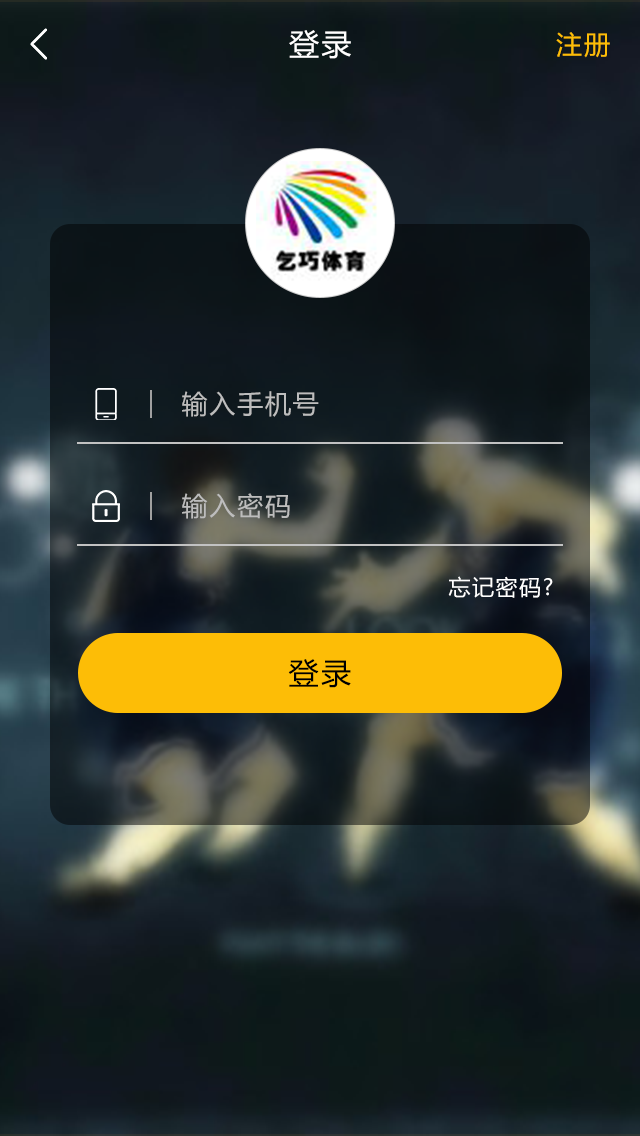
<style>
.page{position:relative;width:640px;height:1136px}
.page>*{position:absolute;margin:0}
.t1{font:30px "MicrosoftYaHei";letter-spacing:0.07em;color:#ffffff}
.t2{font:26px "MicrosoftYaHei";letter-spacing:0.07em;color:#fdbd06}
.t3{font:26px "MicrosoftYaHei";letter-spacing:0.07em;color:#bdbdbd}
.t4{font:22px "MicrosoftYaHei";letter-spacing:0.07em;color:#ffffff}
.t5{font:30px "MicrosoftYaHei";letter-spacing:0.07em;color:#000000}
</style>
<div class="page">
<p class="t1" style="left:289px;top:30px;width:62px;height:29px">登录</p>
<p class="t2" style="left:556px;top:32px;width:54px;height:26px">注册</p>
<p class="t3" style="left:182px;top:391px;width:137px;height:26px">输入手机号</p>
<p class="t3" style="left:182px;top:493px;width:108px;height:26px">输入密码</p>
<p class="t4" style="left:448px;top:576px;width:105px;height:22px">忘记密码?</p>
<p class="t5" style="left:288px;top:659px;width:63px;height:29px">登录</p>
</div>
